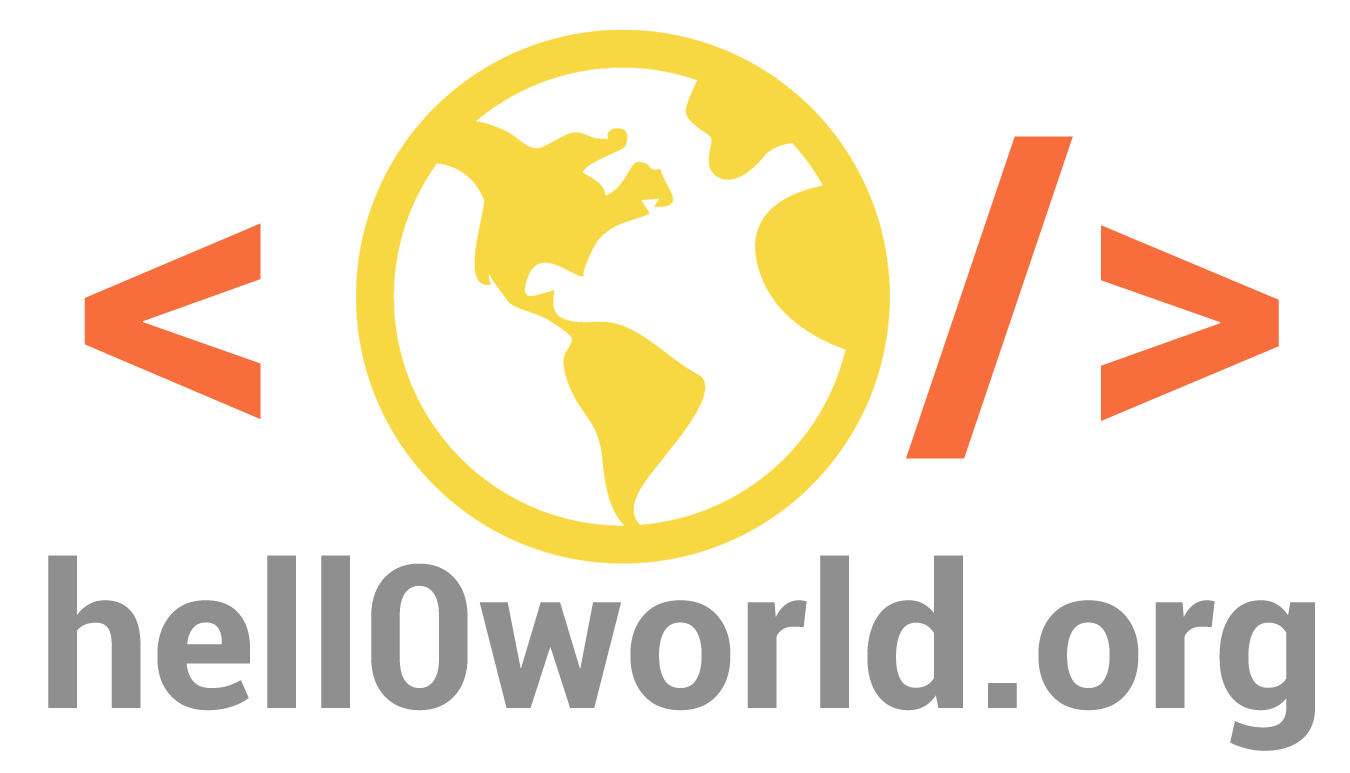
<style>
.page{position:relative;width:1350px;height:773px;background:#ffffff}
.page>*{position:absolute;margin:0}
.t1{font:416.7px "Roboto-Bold";color:#f76d3c}
.t2{font:200px "Roboto-Bold";color:#8f8f8f}
</style>
<div class="page">
<p class="t1" style="left:84px;top:136px;width:1195px;height:323px">&lt;      /&gt;</p>
<p class="t2" style="left:48px;top:555px;width:1267px;height:196px">hell0world.org</p>
</div>
